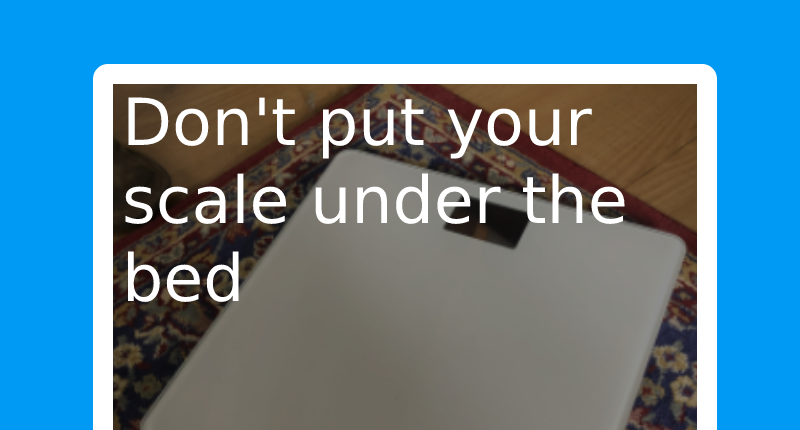
<style>
.page{position:relative;width:800px;height:430px;background:#009af4}
.page>*{position:absolute;margin:0}
.t1{font:65px "DejaVuSans";color:#ffffff}
</style>
<div class="page">
<p class="t1" style="left:125px;top:97px;width:500px;height:205px">Don't put your scale under the bed</p>
</div>
